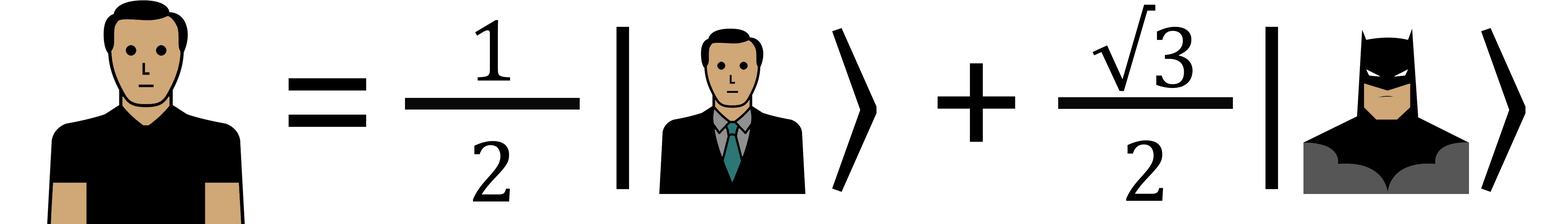
<style>
.page{position:relative;width:1568px;height:224px;background:#ffffff}
.page>*{position:absolute;margin:0}
.t1{font:89.6px "Cambria";color:#000000}
.t2{font:179.2px "Cambria";color:#000000}
.t3{font:179.2px "SitkaSmall-Italic";color:#000000}
</style>
<div class="page">
<p class="t1" style="left:1093px;top:5px;width:100px;height:86px">√3</p>
<p class="t2" style="left:289px;top:27px;width:1237px;height:165px">=     <span class="t3">|</span>    ⟩ +     <span class="t3">|</span>    ⟩</p>
<p class="t1" style="left:475px;top:20px;width:35px;height:61px">1</p>
<p class="t1" style="left:473px;top:141px;width:37px;height:61px">2</p>
<p class="t1" style="left:1126px;top:140px;width:37px;height:61px">2</p>
</div>
